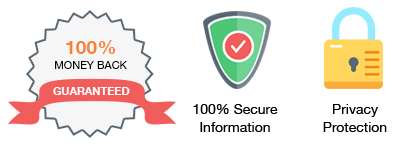
<style>
.page{position:relative;width:404px;height:147px;background:#ffffff}
.page>*{position:absolute;margin:0}
.t1{font:19.5px "HelveticaNeue-Bold";color:#f98037}
.t2{font:11px "HelveticaNeue";color:#000000;text-transform:uppercase}
.t3{font:11px "HelveticaNeue-Bold";color:#ffffff;text-transform:uppercase}
.t4{font:14px/18px "HelveticaNeue";color:#000000}
</style>
<div class="page">
<p class="t1" style="left:66px;top:40px;width:50px;height:14px">100%</p>
<p class="t2" style="left:55px;top:61px;width:72px;height:8px">Money Back</p>
<p class="t3" style="left:53px;top:87px;width:77px;height:8px">guaranteed</p>
<p class="t4" style="left:193px;top:104px;width:85px;height:28px;text-align:center">100% Secure<br>Information</p>
<p class="t4" style="left:323px;top:104px;width:64px;height:28px;text-align:center">Privacy<br>Protection</p>
</div>
